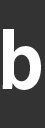
<style>
.page{position:relative;width:45px;height:128px;background:#333333}
.page>*{position:absolute;margin:0}
.t1{font:75px "AdobeGothicStd-Bold";color:#ffffff}
</style>
<div class="page">
<p class="t1" style="left:2px;top:29px;width:39px;height:61px">b</p>
</div>
